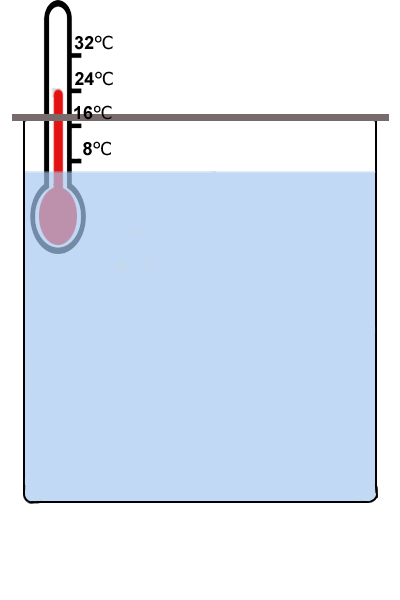
<style>
.page{position:relative;width:400px;height:600px;background:#ffffff}
.page>*{position:absolute;margin:0}
.t1{font:18px "Arial-BoldMT";color:#000000}
.t2{font:18px "Tahoma";color:#000000}
</style>
<div class="page">
<p class="t1" style="left:74px;top:35px;width:39px;height:15px">32<span class="t2">℃</span></p>
<p class="t1" style="left:75px;top:71px;width:38px;height:15px">24<span class="t2">℃</span></p>
<p class="t1" style="left:74px;top:105px;width:38px;height:15px">16<span class="t2">℃</span></p>
<p class="t1" style="left:83px;top:141px;width:28px;height:15px">8<span class="t2">℃</span></p>
</div>
